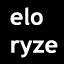
<style>
.page{position:relative;width:64px;height:64px;background:#000000}
.page>*{position:absolute;margin:0}
.t1{font:23.3px "TrebuchetMS-Bold";color:#ffffff}
</style>
<div class="page">
<p class="t1" style="left:10px;top:7px;width:48px;height:51px">elo<br>ryze</p>
</div>
